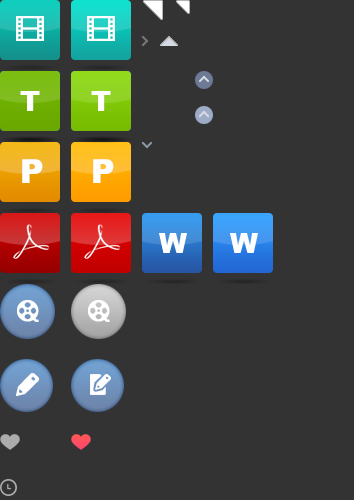
<style>
.page{position:relative;width:354px;height:500px;background:#333333}
.page>*{position:absolute;margin:0}
.t1{font:27.5px "Arial-Black";color:#ffffff}
.t2{font:33.2px "Arial-Black";color:#ffffff}
</style>
<div class="page">
<p class="t1" style="left:20px;top:91px;width:20px;height:20px">T</p>
<p class="t1" style="left:20px;top:91px;width:20px;height:20px">T</p>
<p class="t1" style="left:91px;top:91px;width:20px;height:20px">T</p>
<p class="t1" style="left:91px;top:91px;width:20px;height:20px">T</p>
<p class="t2" style="left:22px;top:159px;width:21px;height:24px">P</p>
<p class="t2" style="left:93px;top:159px;width:21px;height:24px">P</p>
<p class="t1" style="left:159px;top:233px;width:28px;height:20px">W</p>
<p class="t1" style="left:230px;top:233px;width:28px;height:20px">W</p>
</div>
